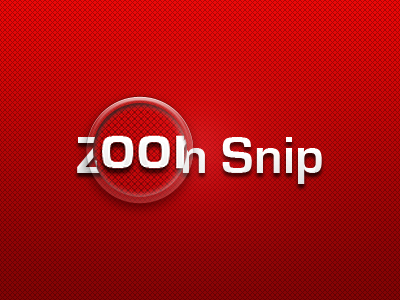
<style>
.page{position:relative;width:400px;height:300px}
.page>*{position:absolute;margin:0}
.t1{font:54.2px "EurostileBold";color:#ffffff}
</style>
<div class="page">
<p class="t1" style="left:77px;top:137px;width:245px;height:47px">Zoom Snip</p>
</div>
